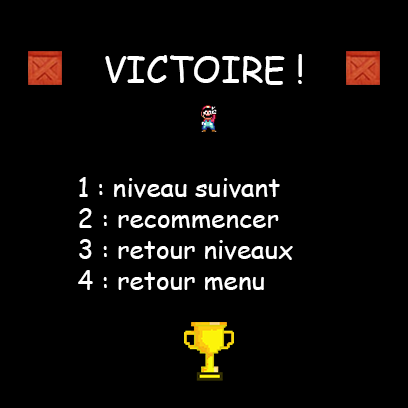
<style>
.page{position:relative;width:408px;height:408px;background:#000000}
.page>*{position:absolute;margin:0}
.t1{font:36px "ComicSansMS";color:#ffffff}
.t2{font:26px "ComicSansMS";color:#ffffff}
</style>
<div class="page">
<p class="t1" style="left:105px;top:54px;width:197px;height:31px">VICTOIRE !</p>
<p class="t2" style="left:78px;top:177px;width:215px;height:113px">1 : niveau suivant<br>          2 : recommencer<br>          3 : retour niveaux<br>          4 : retour menu</p>
</div>
